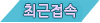
<style>
.page{position:relative;width:100px;height:23px;background:#4cbcd4}
.page>*{position:absolute;margin:0}
.t1{font:14px "NanumGothic";color:#efd7ff;font-weight:bold}
</style>
<div class="page">
<p class="t1" style="left:23px;top:4px;width:54px;height:14px">최근접속</p>
</div>
